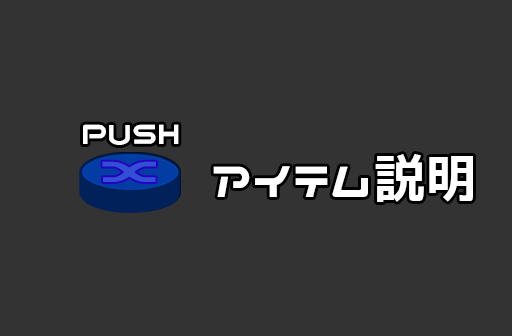
<style>
.page{position:relative;width:512px;height:336px;background:#333333}
.page>*{position:absolute;margin:0}
.t1{font:33.2px "Nicoca";color:#ffffff}
.t2{font:34.9px "Nicoca";color:#334fd5;scale:2.1 1}
.t3{font:52.4px "Nicoca";color:#ffffff}
</style>
<div class="page">
<p class="t1" style="left:83px;top:124px;width:96px;height:21px">PUSH</p>
<p class="t2" style="left:102px;top:161px;width:54px;height:21px">X</p>
<p class="t3" style="left:213px;top:154px;width:260px;height:48px">アイテム説明</p>
</div>
